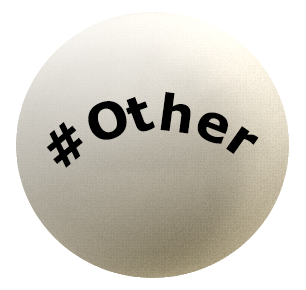
<style>
.page{position:relative;width:306px;height:290px;background:#ffffff}
.page>*{position:absolute;margin:0}
.t1{font:50px "Verdana-Bold";color:#000000}
</style>
<div class="page">
<p class="t1" style="left:46px;top:92px;width:213px;height:76px">#Other</p>
</div>
